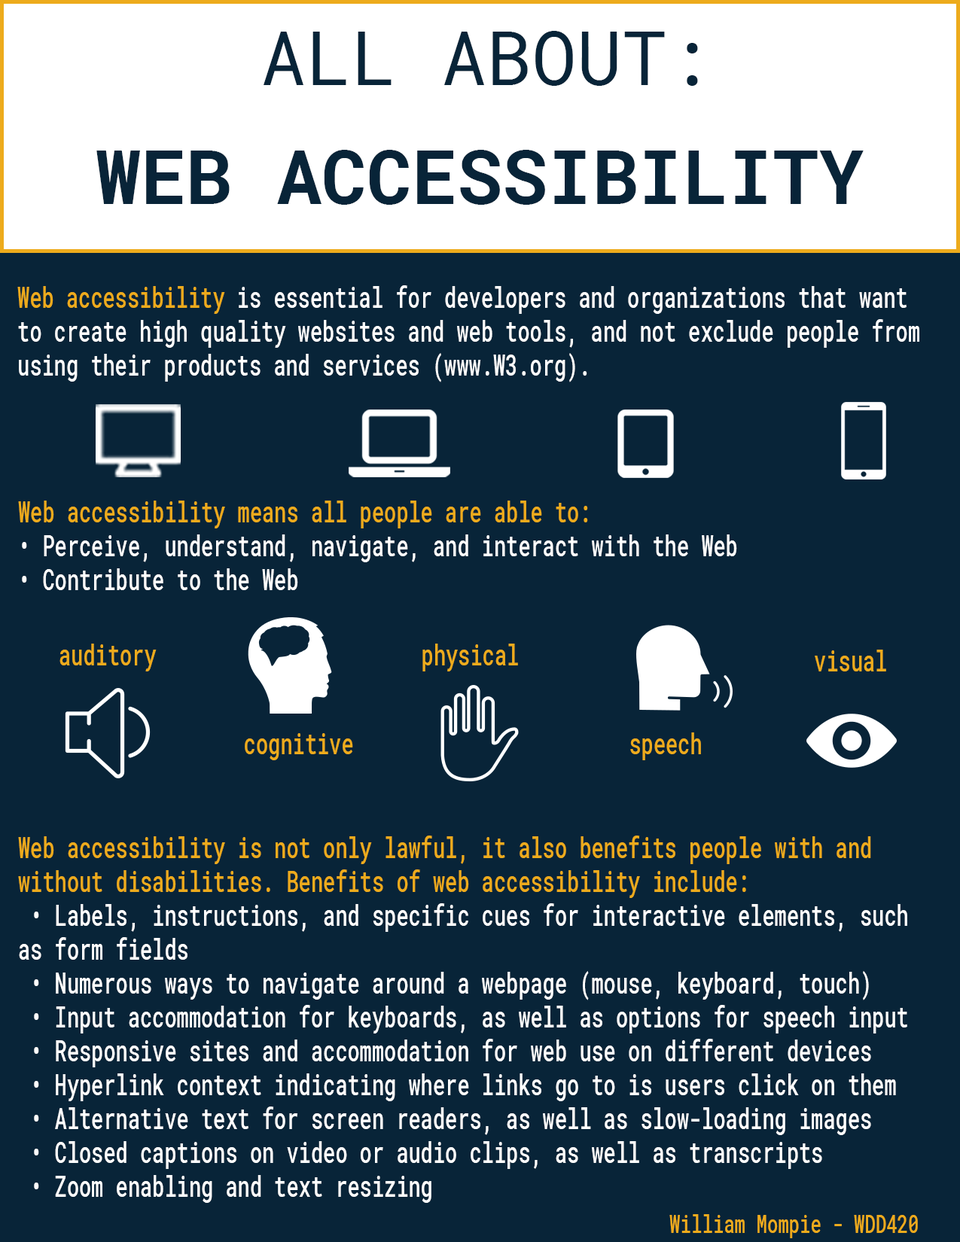
<style>
.page{position:relative;width:960px;height:1242px;background:#082438}
.page>*{position:absolute;margin:0}
.t1{font:75.3px "RobotoMono-Regular";color:#082438}
.t2{font:75.3px "RobotoMono-Bold";color:#082438}
.t3{font:28.2px "RobotoMono-Medium";color:#ffffff;scale:0.72 1}
.t4{font:28.2px "RobotoMono-Medium";color:#edab1c;scale:0.72 1}
.t5{font:25.1px "RobotoMono-Medium";color:#edab1c;scale:0.72 1}
</style>
<div class="page">
<p class="t1" style="left:264px;top:31px;width:434px;height:55px">ALL ABOUT:</p>
<p class="t2" style="left:96px;top:150px;width:768px;height:55px">WEB ACCESSIBILITY</p>
<p class="t3" style="left:17px;top:285px;width:902px;height:97px"><span class="t4">Web accessibility </span>is essential for developers and organizations that want<br>to create high quality websites and web tools, and not exclude people from<br>using their products and services (www.W3.org).</p>
<p class="t3" style="left:18px;top:501px;width:719px;height:89px"><span class="t4">Web accessibility means all people are able to:<br></span>• Perceive, understand, navigate, and interact with the Web<br>• Contribute to the Web</p>
<p class="t4" style="left:59px;top:644px;width:98px;height:28px">auditory</p>
<p class="t4" style="left:422px;top:644px;width:96px;height:28px">physical</p>
<p class="t4" style="left:815px;top:650px;width:71px;height:22px">visual</p>
<p class="t4" style="left:245px;top:733px;width:108px;height:27px">cognitive</p>
<p class="t4" style="left:630px;top:733px;width:71px;height:27px">speech</p>
<p class="t3" style="left:18px;top:836px;width:889px;height:367px"><span class="t4">Web accessibility is not only lawful, it also benefits people with and<br>without disabilities. Benefits of web accessibility include:<br></span> • Labels, instructions, and specific cues for interactive elements, such<br>as form fields<br> • Numerous ways to navigate around a webpage (mouse, keyboard, touch)<br> • Input accommodation for keyboards, as well as options for speech input<br> • Responsive sites and accommodation for web use on different devices<br> • Hyperlink context indicating where links go to is users click on them<br> • Alternative text for screen readers, as well as slow-loading images<br> • Closed captions on video or audio clips, as well as transcripts<br> • Zoom enabling and text resizing</p>
<p class="t5" style="left:669px;top:1214px;width:249px;height:24px">William Mompie - WDD420</p>
</div>
